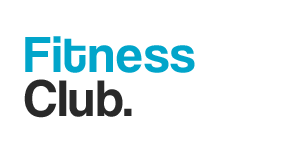
<style>
.page{position:relative;width:300px;height:150px;background:#ffffff}
.page>*{position:absolute;margin:0}
.t1{font:53px "CoolveticaRg-Regular";letter-spacing:0.025em;color:#01a5ca}
.t2{font:53px "CoolveticaRg-Regular";letter-spacing:0.025em;color:#292929}
</style>
<div class="page">
<p class="t1" style="left:24px;top:36px;width:171px;height:82px">Fitness <span class="t2">Club.</span></p>
</div>
